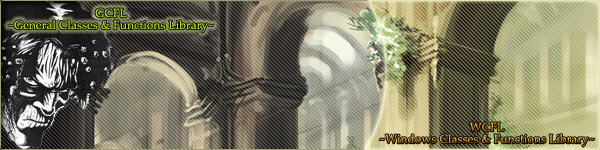
<style>
.page{position:relative;width:600px;height:150px}
.page>*{position:absolute;margin:0}
.t1{font:12px/12px "PalatinoLinotype-Roman";color:#a8d52f}
.t2{font:12px/12px "PalatinoLinotype-Roman"}
</style>
<div class="page">
<p class="t1" style="left:8px;top:8px;width:206px;height:25px;text-align:center">GCFL<br>~General Classes &amp; Functions Library~</p>
<p class="t2" style="left:379px;top:122px;width:216px;height:25px;text-align:center">WCFL<br>~Windows Classes &amp; Functions Library~</p>
</div>
